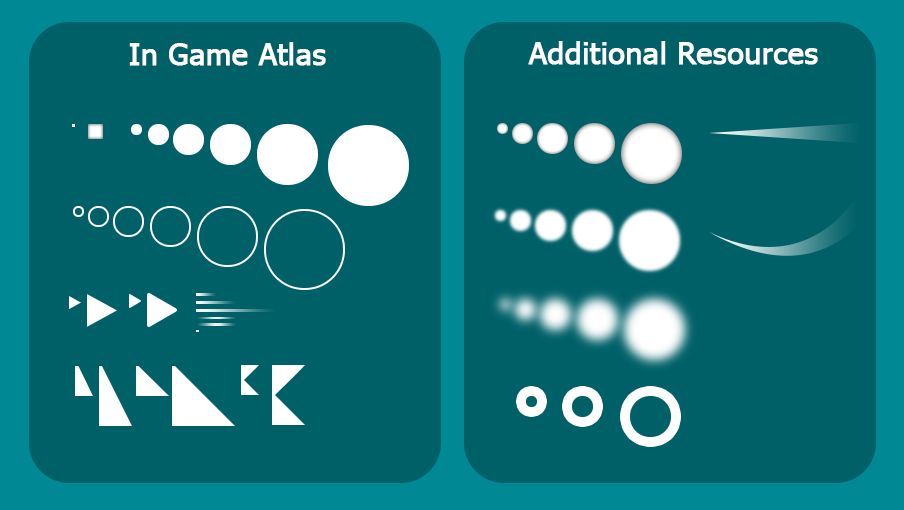
<style>
.page{position:relative;width:904px;height:510px;background:#006068}
.page>*{position:absolute;margin:0}
.t1{font:30px "Tahoma";color:#ffffff;font-weight:bold}
</style>
<div class="page">
<p class="t1" style="left:528px;top:41px;width:290px;height:24px">Additional Resources</p>
<p class="t1" style="left:129px;top:42px;width:197px;height:24px">In Game Atlas</p>
</div>
